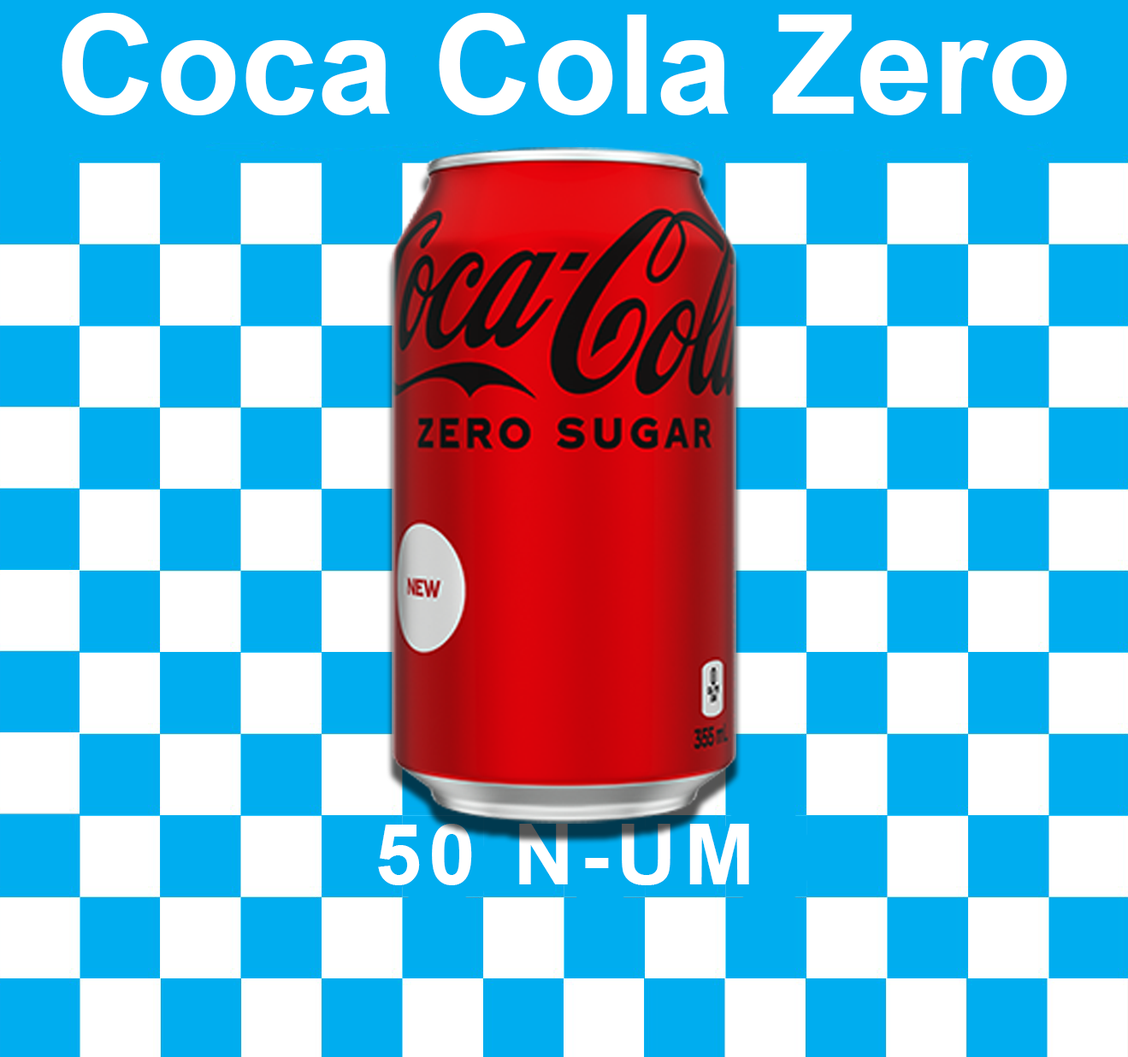
<style>
.page{position:relative;width:1128px;height:1057px;background:#00adef}
.page>*{position:absolute;margin:0}
.t1{font:138.5px "Arial-BoldMT";color:#ffffff}
.t2{font:84.6px "Arial-BoldMT";letter-spacing:0.08em;color:#ffffff}
</style>
<div class="page">
<p class="t1" style="left:62px;top:13px;width:1005px;height:102px">Coca Cola Zero</p>
<p class="t2" style="left:378px;top:824px;width:371px;height:62px">50 N-UM</p>
</div>
